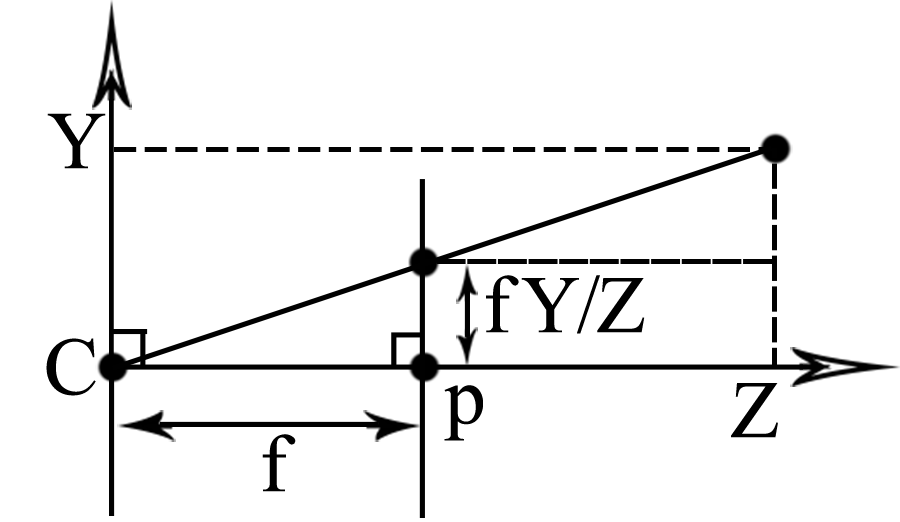
<style>
.page{position:relative;width:900px;height:522px;background:#ffffff}
.page>*{position:absolute;margin:0}
.t1{font:81.8px "TimesNewRomanPSMT";letter-spacing:-0.04em;color:#000000}
</style>
<div class="page">
<p class="t1" style="left:47px;top:113px;width:59px;height:56px">Y</p>
<p class="t1" style="left:486px;top:275px;width:159px;height:59px">f Y/Z</p>
<p class="t1" style="left:46px;top:338px;width:50px;height:58px">C</p>
<p class="t1" style="left:444px;top:385px;width:39px;height:56px">p</p>
<p class="t1" style="left:731px;top:383px;width:47px;height:55px">Z</p>
<p class="t1" style="left:262px;top:434px;width:34px;height:58px">f</p>
</div>
